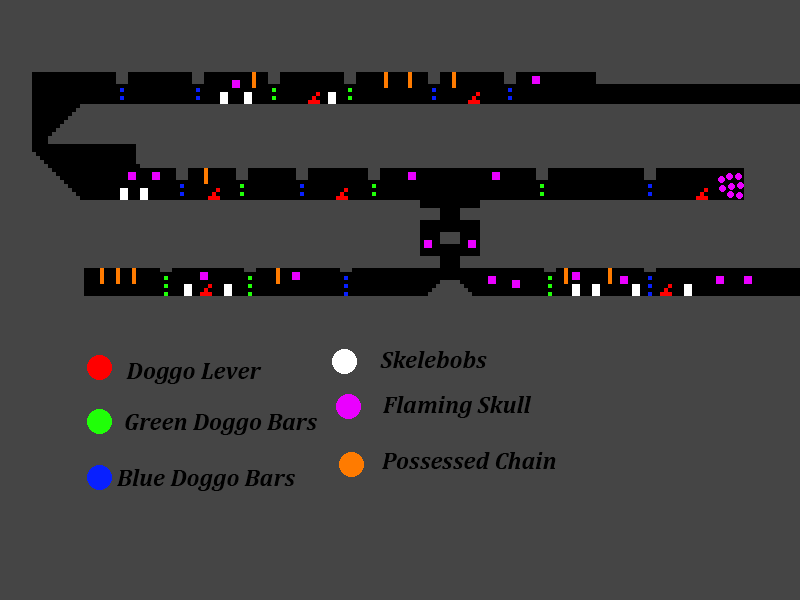
<style>
.page{position:relative;width:800px;height:600px;background:#454545}
.page>*{position:absolute;margin:0}
.t1{font:24px "Cambria-BoldItalic";color:#000000}
</style>
<div class="page">
<p class="t1" style="left:380px;top:351px;width:107px;height:17px">Skelebobs</p>
<p class="t1" style="left:126px;top:363px;width:136px;height:21px">Doggo Lever</p>
<p class="t1" style="left:383px;top:396px;width:149px;height:22px">Flaming Skull</p>
<p class="t1" style="left:125px;top:414px;width:192px;height:21px">Green Doggo Bars</p>
<p class="t1" style="left:382px;top:452px;width:174px;height:17px">Possessed Chain</p>
<p class="t1" style="left:117px;top:469px;width:178px;height:22px">Blue Doggo Bars</p>
</div>
